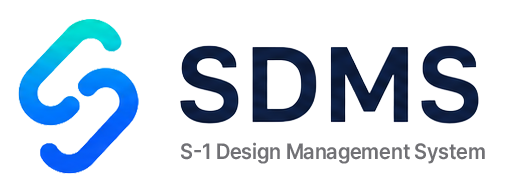
<style>
.page{position:relative;width:519px;height:196px;background:#ffffff}
.page>*{position:absolute;margin:0}
.t1{font:22px "Pretendard-SemiBold";letter-spacing:-0.01em;color:#717175;scale:0.94 1}
</style>
<div class="page">
<p class="t1" style="left:180px;top:142px;width:305px;height:22px">S-1 Design Management System</p>
</div>
